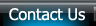
<style>
.page{position:relative;width:96px;height:26px}
.page>*{position:absolute;margin:0}
.t1{font:16px "Tahoma";color:#ffffff}
</style>
<div class="page">
<p class="t1" style="left:9px;top:8px;width:76px;height:13px">Contact Us</p>
</div>
